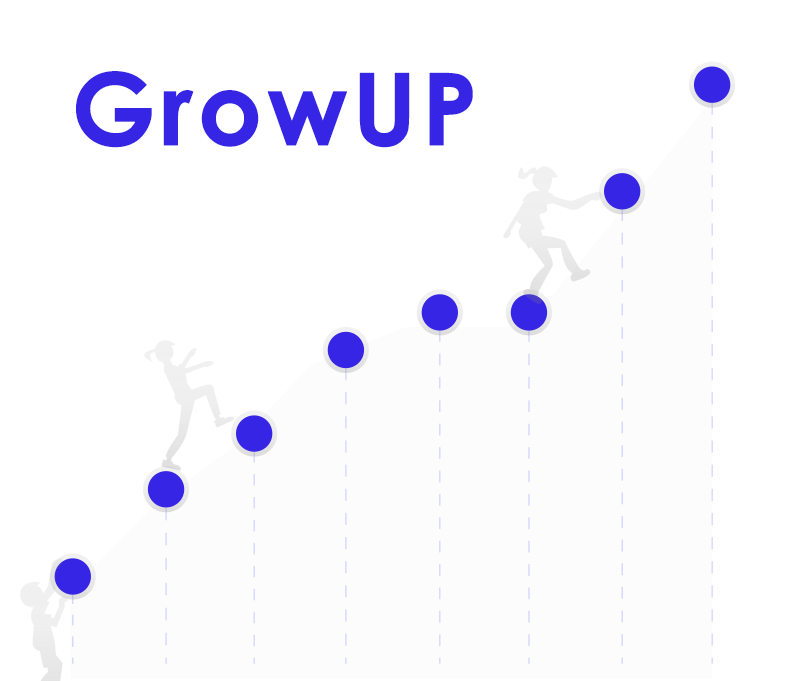
<style>
.page{position:relative;width:810px;height:681px;background:#ffffff}
.page>*{position:absolute;margin:0}
.t1{font:100px "CenturyGothic-Bold";letter-spacing:0.025em;color:#3625e4;font-weight:bold}
</style>
<div class="page">
<p class="t1" style="left:76px;top:71px;width:397px;height:77px">GrowUP</p>
</div>
